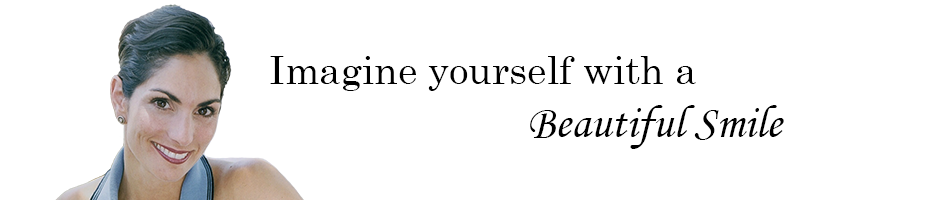
<style>
.page{position:relative;width:930px;height:200px;background:#ffffff}
.page>*{position:absolute;margin:0}
.t1{font:66.7px "CenturySchoolbook";color:#000000}
.t2{font:79.2px "MonotypeCorsiva";color:#000000}
</style>
<div class="page">
<p class="t1" style="left:270px;top:56px;width:426px;height:35px">Imagine yourself with a</p>
<p class="t2" style="left:530px;top:105px;width:254px;height:44px">Beautiful Smile</p>
</div>
